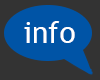
<style>
.page{position:relative;width:100px;height:80px;background:#333333}
.page>*{position:absolute;margin:0}
.t1{font:30px "TrebuchetMS";color:#ffffff}
</style>
<div class="page">
<p class="t1" style="left:24px;top:21px;width:51px;height:22px">info</p>
</div>
